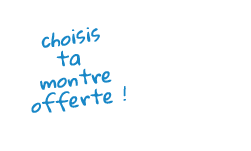
<style>
.page{position:relative;width:251px;height:151px;background:#ffffff}
.page>*{position:absolute;margin:0}
.t1{font:17.5px "GloriaHallelujah";color:#1887c7;font-weight:bold;font-style:italic}
</style>
<div class="page">
<p class="t1" style="left:31px;top:27px;width:95px;height:86px;text-align:center;rotate:-7deg">choisis<br>ta <br>montre<br>offerte !</p>
</div>
